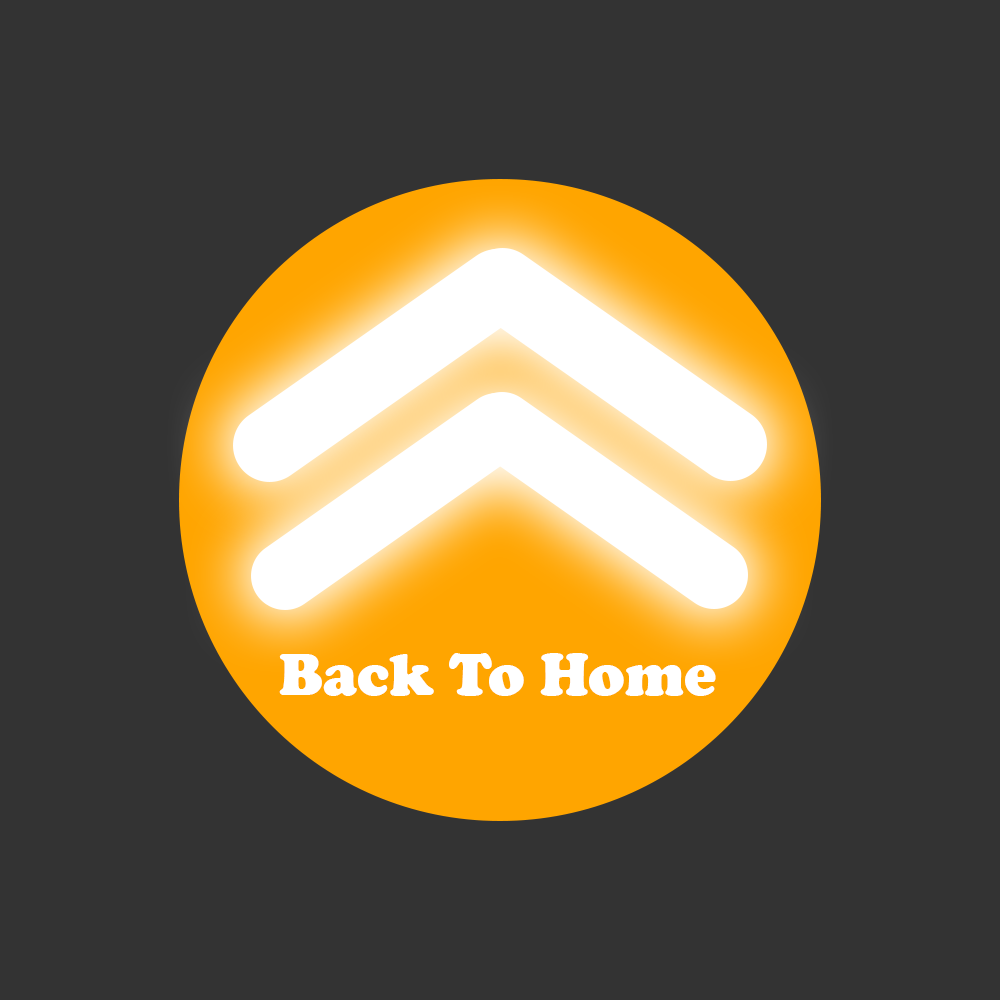
<style>
.page{position:relative;width:1000px;height:1000px;background:#333333}
.page>*{position:absolute;margin:0}
.t1{font:61px "CooperBlack";color:#ffffff}
</style>
<div class="page">
<p class="t1" style="left:279px;top:653px;width:437px;height:43px">Back To Home</p>
</div>
